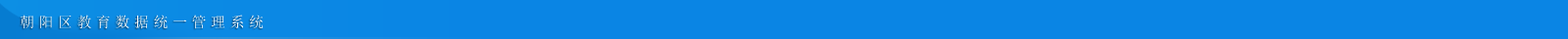
<style>
.page{position:relative;width:1568px;height:39px;background:#0a85e4}
.page>*{position:absolute;margin:0}
.t1{font:14.7px "SimSun";letter-spacing:0.3em;color:#ffffff}
</style>
<div class="page">
<p class="t1" style="left:20px;top:15px;width:244px;height:14px">朝阳区教育数据统一管理系统</p>
</div>
